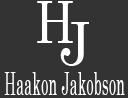
<style>
.page{position:relative;width:128px;height:98px;background:#333333}
.page>*{position:absolute;margin:0}
.t1{font:58.5px "Century";letter-spacing:0.025em;color:#ffffff;scale:0.82 1}
.t2{font:59.9px "Century";letter-spacing:0.025em;color:#ffffff;scale:0.91 1}
.t3{font:31.8px "Century";letter-spacing:0.025em;color:#ffffff;scale:0.44 1}
</style>
<div class="page">
<p class="t1" style="left:37px;top:1px;width:36px;height:42px">H</p>
<p class="t2" style="left:60px;top:22px;width:29px;height:44px">J</p>
<p class="t3" style="left:4px;top:72px;width:121px;height:23px">Haakon Jakobson</p>
</div>
